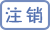
<style>
.page{position:relative;width:50px;height:30px;background:#ffffff}
.page>*{position:absolute;margin:0}
.t1{font:17px "FZZHYJW--GB1-0";letter-spacing:0.2em;color:#516faf;font-weight:bold}
</style>
<div class="page">
<p class="t1" style="left:5px;top:6px;width:38px;height:18px">注销</p>
</div>
